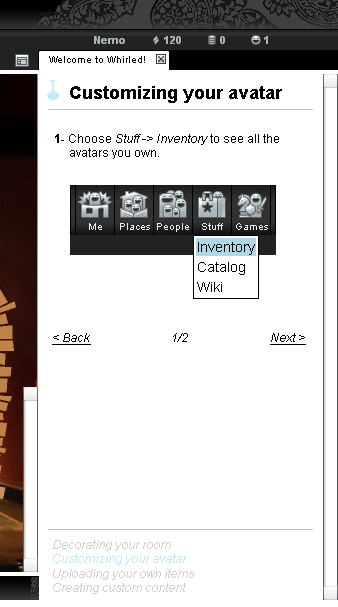
<style>
.page{position:relative;width:338px;height:607px;background:#ffffff}
.page>*{position:absolute;margin:0}
.t1{font:10px "ArialMT";color:#000000}
.t2{font:18px "Arial-BoldMT";color:#000000}
.t3{font:12px "ArialMT";color:#000000}
.t4{font:12px "Arial-BoldMT";color:#000000}
.t5{font:12px "Arial-ItalicMT";color:#000000}
.t6{font:12px "Arial-ItalicMT";color:#000000;text-decoration:underline}
.t7{font:12px "Arial-ItalicMT";color:#d0d0d0}
.t8{font:12px "Arial-ItalicMT";color:#c4e8f8}
</style>
<div class="page">
<p class="t1" style="left:49px;top:56px;width:96px;height:7px">Welcome to Whirled!</p>
<p class="t2" style="left:70px;top:86px;width:212px;height:17px">Customizing your avatar</p>
<p class="t3" style="left:55px;top:134px;width:224px;height:25px"><span class="t4">1-</span> Choose <span class="t5">Stuff -&gt; Inventory</span> to see all the avatars you own.</p>
<p class="t6" style="left:52px;top:333px;width:39px;height:12px">&lt; Back</p>
<p class="t5" style="left:173px;top:333px;width:15px;height:9px">1/2</p>
<p class="t6" style="left:270px;top:333px;width:36px;height:12px">Next &gt;</p>
<p class="t7" style="left:53px;top:540px;width:141px;height:54px">Decorating your room<br><span class="t8">Customizing your avatar<br></span>Uploading your own items<br>Creating custom content</p>
</div>
